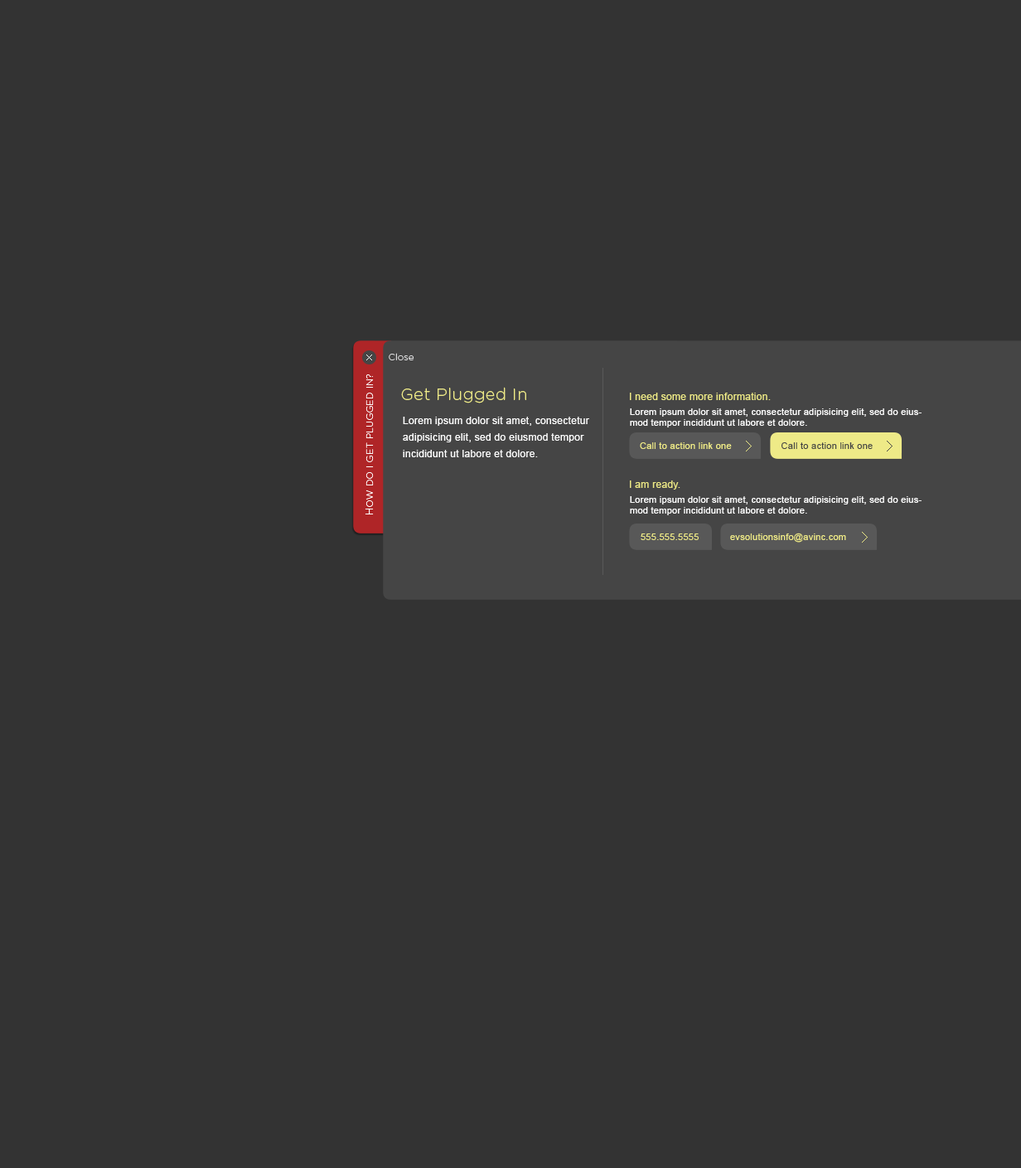
<style>
.page{position:relative;width:1021px;height:1168px;background:#333333}
.page>*{position:absolute;margin:0}
.t1{font:9.1px "GothamRounded-Light";letter-spacing:0.025em;color:#dfdfe0}
.t2{font:9.1px "GothamRounded-Light";letter-spacing:0.025em;color:#ffffff}
.t3{font:9.9px "GothamRounded-Light";letter-spacing:0.025em;color:#ffffff}
.t4{font:16.6px "GothamRounded-Light";letter-spacing:0.025em;color:#eeea87}
.t5{font:9.9px "ArialMT";letter-spacing:0.025em;color:#eeea87}
.t6{font:9.1px/10.8px "ArialMT";letter-spacing:0.025em;color:#ffffff}
.t7{font:9.9px/16.6px "ArialMT";letter-spacing:0.025em;color:#ffffff}
.t8{font:9.1px "ArialMT";letter-spacing:0.025em;color:#eeea87}
</style>
<div class="page">
<p class="t1" style="left:389px;top:353px;width:25px;height:7px">Close</p>
<p class="t2" style="left:365px;top:374px;width:9px;height:141px;rotate:-90deg"><span class="t3">H</span>OW DO I GET PLUGGED IN?</p>
<p class="t4" style="left:401px;top:387px;width:125px;height:16px">Get Plugged In</p>
<p class="t5" style="left:630px;top:393px;width:141px;height:7px">I need some more information.</p>
<p class="t6" style="left:630px;top:408px;width:291px;height:20px">Lorem ipsum dolor sit amet, consectetur adipisicing elit, sed do eiusmod tempor incididunt ut labore et dolore.</p>
<p class="t7" style="left:403px;top:417px;width:186px;height:40px">Lorem ipsum dolor sit amet, consectetur adipisicing elit, sed do eiusmod tempor incididunt ut labore et dolore.</p>
<p class="t5" style="left:630px;top:481px;width:50px;height:9px">I am ready.</p>
<p class="t6" style="left:630px;top:496px;width:291px;height:19px">Lorem ipsum dolor sit amet, consectetur adipisicing elit, sed do eiusmod tempor incididunt ut labore et dolore.</p>
<p class="t8" style="left:640px;top:533px;width:206px;height:10px">555.555.5555  evsolutionsinfo@avinc.com</p>
</div>
